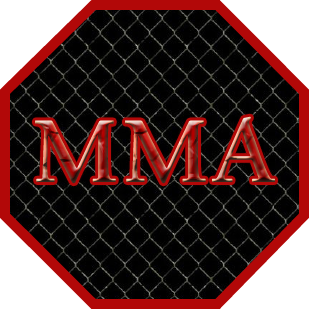
<style>
.page{position:relative;width:309px;height:309px}
.page>*{position:absolute;margin:0}
.t1{font:92.4px "CalifornianFB-Bold";letter-spacing:0.02em}
</style>
<div class="page">
<p class="t1" style="left:35px;top:116px;width:240px;height:68px">MMA</p>
</div>
